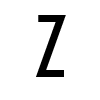
<style>
.page{position:relative;width:100px;height:100px;background:#ffffff}
.page>*{position:absolute;margin:0}
.t1{font:100px "TwCenMT-Condensed";color:#000000}
</style>
<div class="page">
<p class="t1" style="left:36px;top:15px;width:30px;height:62px">Z</p>
</div>
